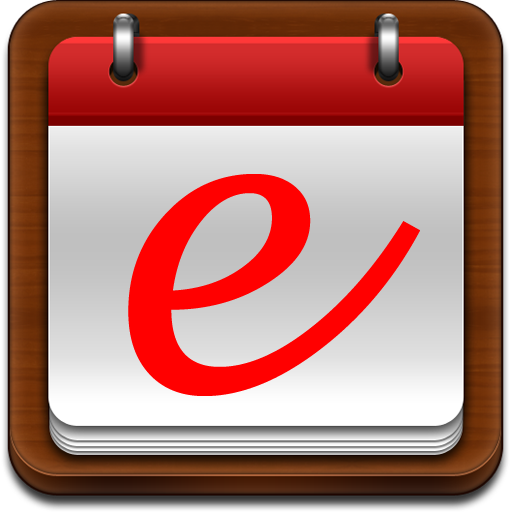
<style>
.page{position:relative;width:512px;height:512px}
.page>*{position:absolute;margin:0}
.t1{font:400px "LucidaHandwriting-Italic";color:#ff0000}
</style>
<div class="page">
<p class="t1" style="left:128px;top:174px;width:292px;height:222px">e</p>
</div>
